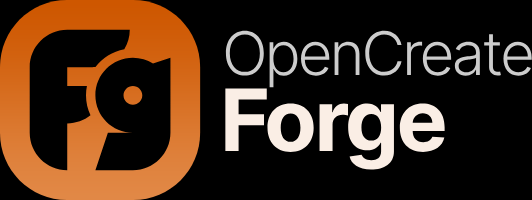
<style>
.page{position:relative;width:532px;height:200px;background:#000000}
.page>*{position:absolute;margin:0}
.t1{font:60.1px "Inter-Light";letter-spacing:-0.05em;color:#cccccc}
.t2{font:85.9px "Inter-Bold";letter-spacing:-0.03em;color:#faeee5}
</style>
<div class="page">
<p class="t1" style="left:225px;top:30px;width:307px;height:58px">OpenCreate</p>
<p class="t2" style="left:225px;top:88px;width:220px;height:82px">Forge</p>
</div>
